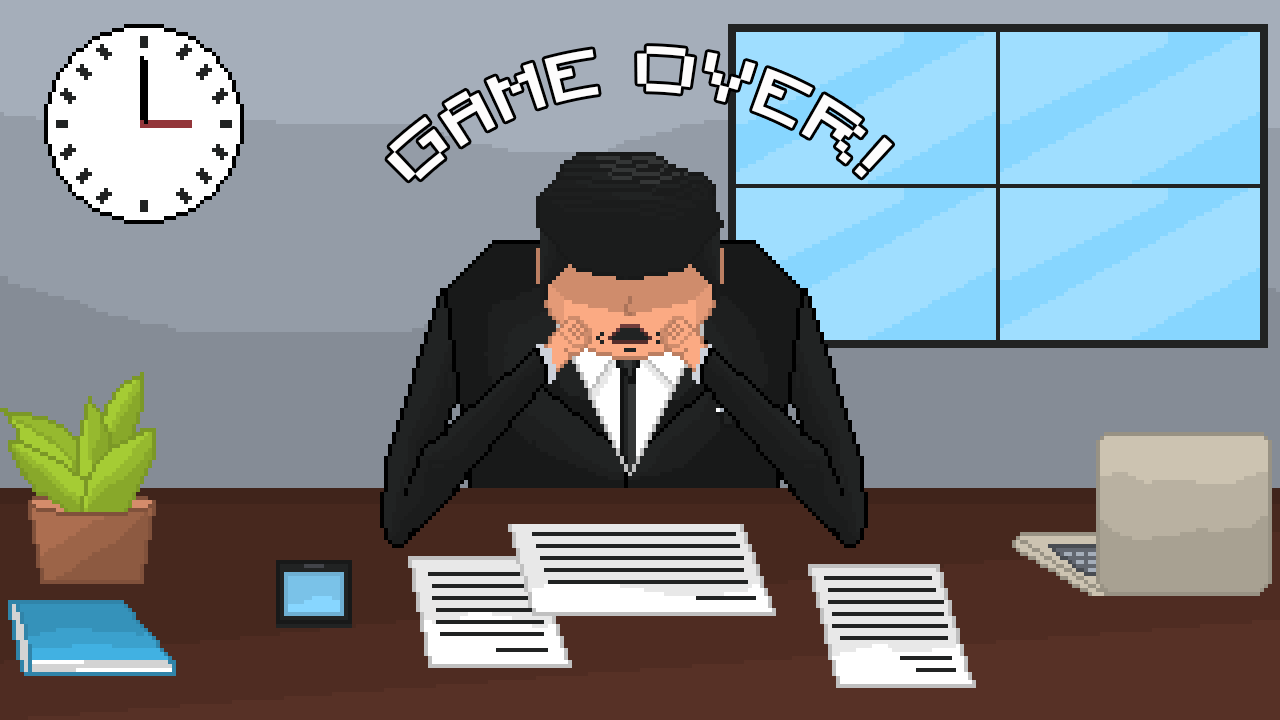
<style>
.page{position:relative;width:1280px;height:720px}
.page>*{position:absolute;margin:0}
.t1{font:60px "Minecraft";letter-spacing:0.1em;color:#fdfcfc}
</style>
<div class="page">
<p class="t1" style="left:387px;top:46px;width:506px;height:135px;text-align:center">GAME OVER!</p>
</div>
